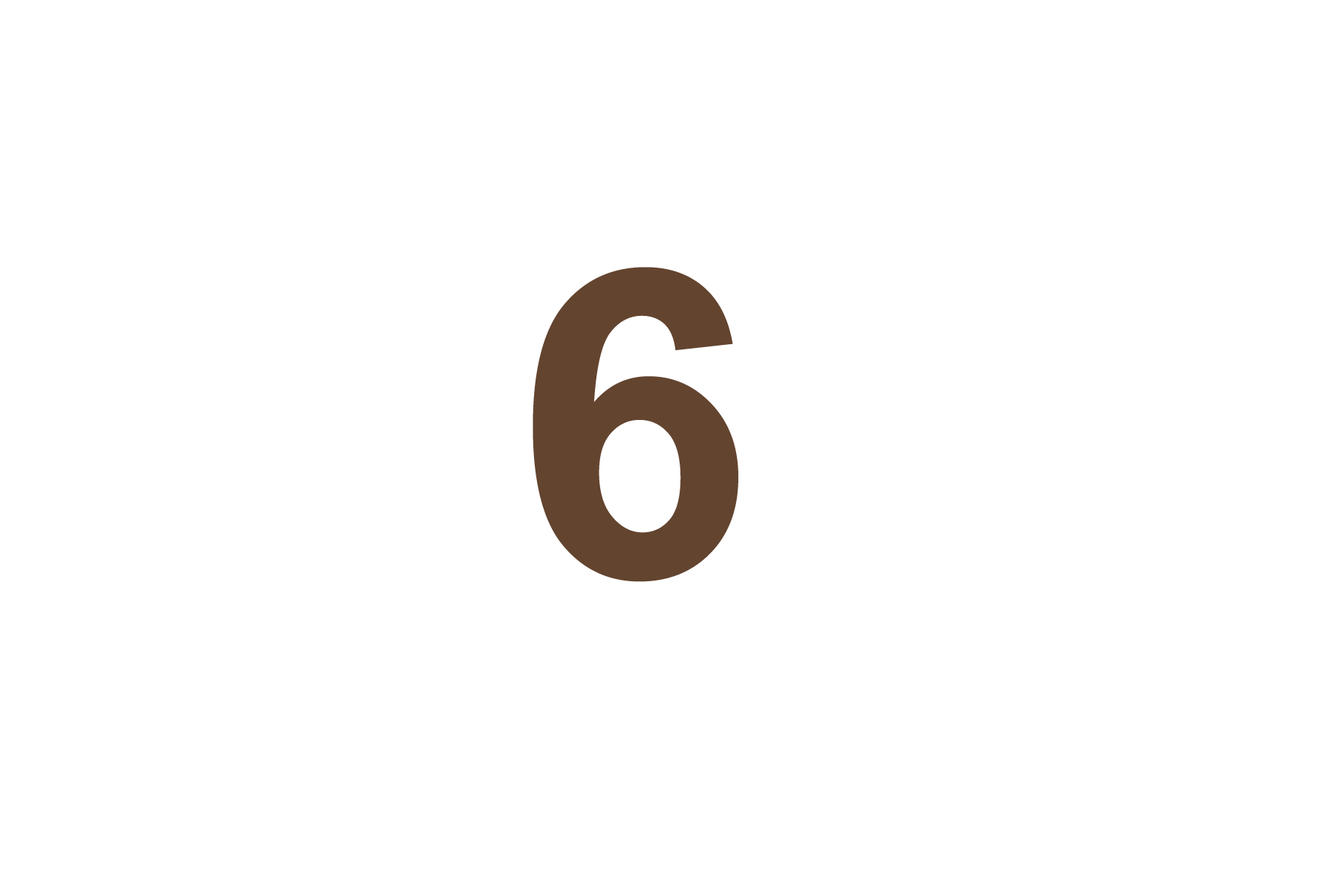
<style>
.page{position:relative;width:1337px;height:892px;background:#ffffff}
.page>*{position:absolute;margin:0}
.t1{font:429.6px "Arial-BoldMT";color:#63442f}
</style>
<div class="page">
<p class="t1" style="left:533px;top:267px;width:206px;height:315px">6</p>
</div>
